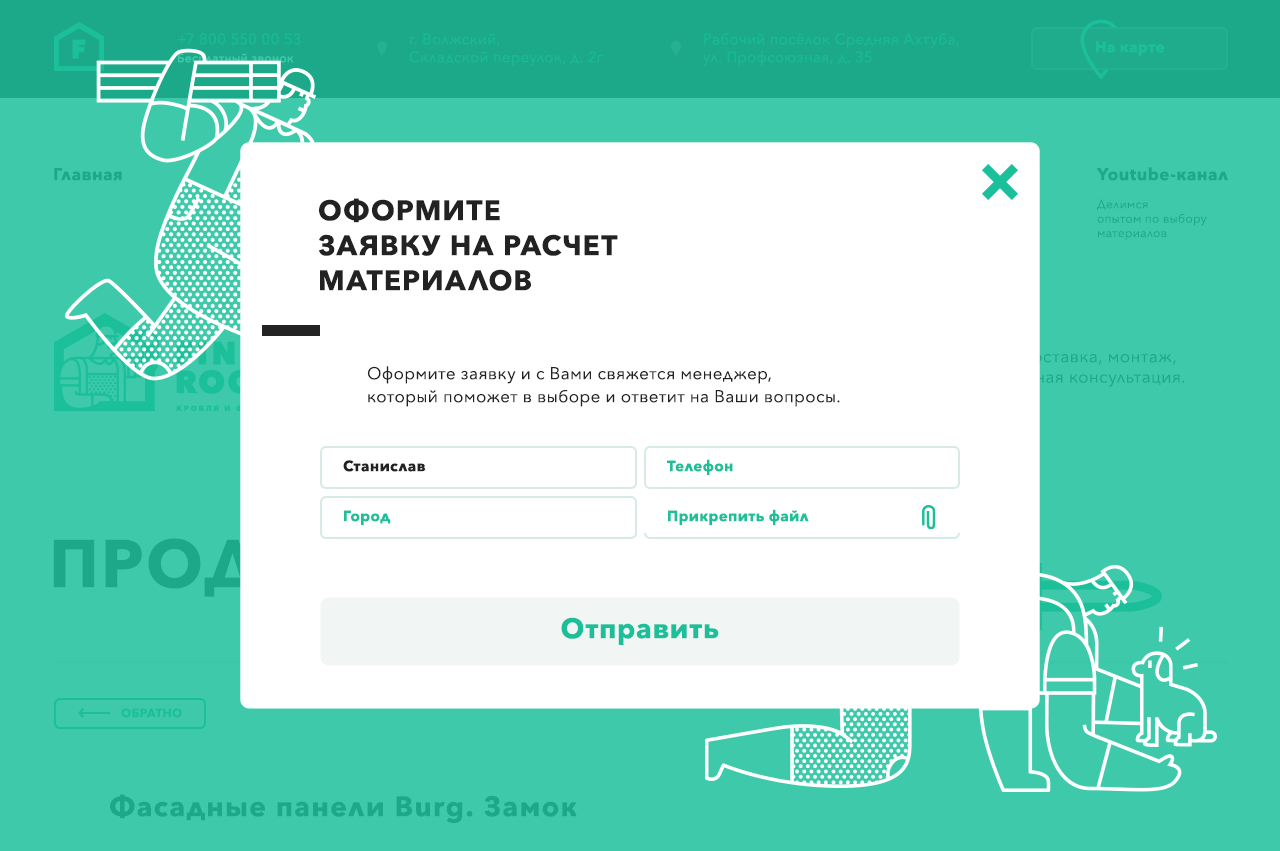
<style>
.page{position:relative;width:1280px;height:851px;background:#3dc9aa}
.page>*{position:absolute;margin:0}
.t1{font:15px "AvenirNext-Regular";letter-spacing:0.025em;color:#17ba95}
.t2{font:15px "AvenirNext-Bold";letter-spacing:0.025em;color:#1bc09b}
.t3{font:28px/35px "AvenirNext-Bold";letter-spacing:0.05em;color:#222222;text-transform:uppercase}
.t4{font:12px "AvenirNext-Regular";letter-spacing:0.025em;color:#1ca989}
.t5{font:17px/23px "AvenirNext-Regular";letter-spacing:0.025em;color:#222222}
.t6{font:15px "AvenirNext-Bold";letter-spacing:0.025em;color:#222222}
.t7{font:28px "AvenirNext-Bold";letter-spacing:0.025em;color:#1bc09b}
.t8{font:12px "AvenirNext-Bold";letter-spacing:0.025em;color:#1bc09b;text-transform:uppercase}
.t9{font:28px "AvenirNext-Bold";letter-spacing:0.05em;color:#1ca889}
</style>
<div class="page">
<p class="t1" style="left:178px;top:33px;width:123px;height:12px">+7 800 550 00 53</p>
<p class="t1" style="left:409px;top:33px;width:194px;height:33px">г. Волжский, <br>Складской переулок, д. 2г</p>
<p class="t1" style="left:703px;top:33px;width:256px;height:33px">Рабочий посёлок Средняя Ахтуба, <br>ул. Профсоюзная, д. 35</p>
<p class="t2" style="left:1096px;top:41px;width:69px;height:15px">На карте</p>
<p class="t3" style="left:319px;top:198px;width:299px;height:93px">Оформите <br>заявку на расчет <br>материалов</p>
<p class="t4" style="left:1097px;top:199px;width:110px;height:41px">Делимся<br>опытом по выбору<br>материалов</p>
<p class="t5" style="left:367px;top:366px;width:473px;height:41px">Оформите заявку и с Вами свяжется менеджер, <br>который поможет в выборе и ответит на Ваши вопросы.</p>
<p class="t6" style="left:343px;top:460px;width:83px;height:12px">Станислав</p>
<p class="t2" style="left:667px;top:459px;width:66px;height:16px">Телефон</p>
<p class="t2" style="left:344px;top:510px;width:47px;height:15px">Город</p>
<p class="t2" style="left:668px;top:509px;width:141px;height:16px">Прикрепить файл</p>
<p class="t7" style="left:561px;top:617px;width:158px;height:28px">Отправить</p>
<p class="t8" style="left:121px;top:708px;width:61px;height:10px">ОБРАТНО</p>
<p class="t9" style="left:110px;top:794px;width:467px;height:29px">Фасадные панели Burg. Замок</p>
</div>
